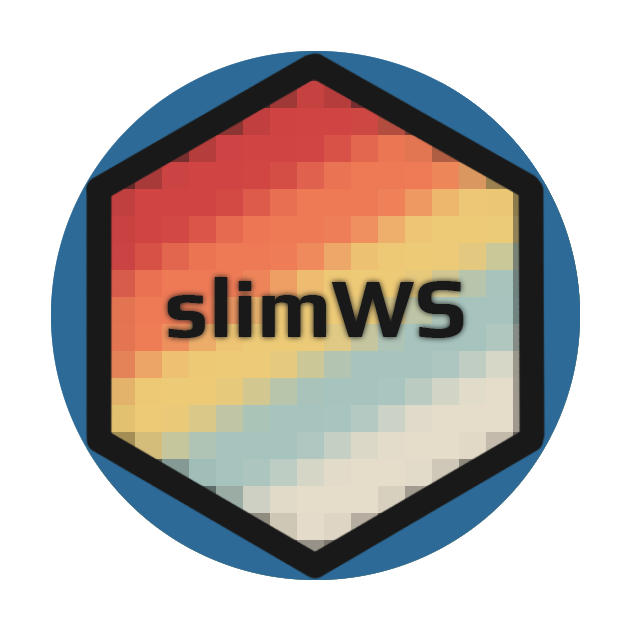
<style>
.page{position:relative;width:630px;height:630px;background:#ffffff}
.page>*{position:absolute;margin:0}
.t1{font:85px "Play-Bold";color:#191919}
</style>
<div class="page">
<p class="t1" style="left:167px;top:277px;width:297px;height:61px">slimWS</p>
</div>
